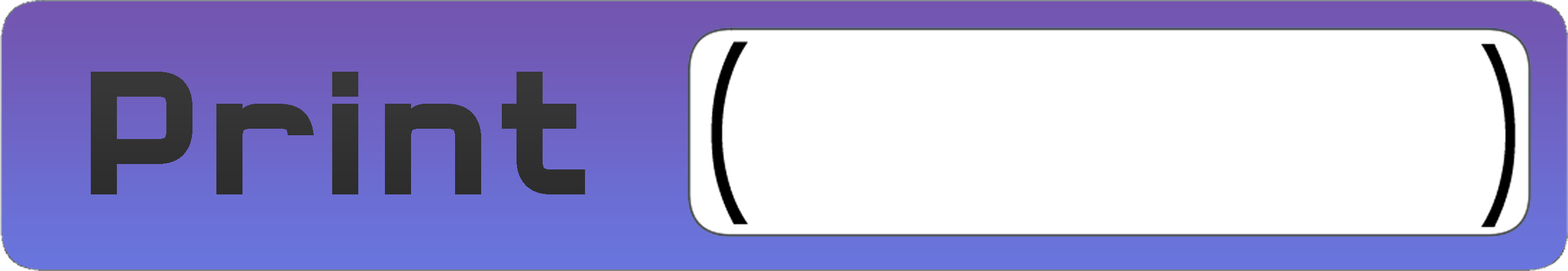
<style>
.page{position:relative;width:1568px;height:271px;background:#ffffff}
.page>*{position:absolute;margin:0}
.t1{font:190.3px "22ndBold";letter-spacing:0.1em;color:#333333}
</style>
<div class="page">
<p class="t1" style="left:91px;top:72px;width:494px;height:123px">Print</p>
</div>
